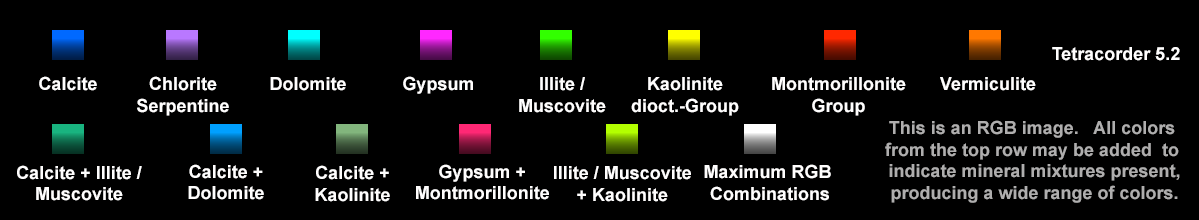
<style>
.page{position:relative;width:1199px;height:220px;background:#000000}
.page>*{position:absolute;margin:0}
.t1{font:18px "Arial-BoldMT";color:#fffefe}
.t2{font:18px "Arial-BoldMT";color:#afaeae}
</style>
<div class="page">
<p class="t1" style="left:1052px;top:47px;width:128px;height:14px">Tetracorder 5.2</p>
<p class="t1" style="left:39px;top:76px;width:58px;height:15px">Calcite</p>
<p class="t1" style="left:137px;top:76px;width:92px;height:40px;text-align:center">Chlorite<br>Serpentine</p>
<p class="t1" style="left:270px;top:77px;width:76px;height:14px">Dolomite</p>
<p class="t1" style="left:403px;top:76px;width:70px;height:18px">Gypsum</p>
<p class="t1" style="left:519px;top:77px;width:87px;height:36px;text-align:center">Illite /<br>Muscovite</p>
<p class="t1" style="left:631px;top:77px;width:108px;height:39px;text-align:center">Kaolinite<br>dioct.-Group</p>
<p class="t1" style="left:772px;top:77px;width:134px;height:39px;text-align:center">Montmorillonite<br>Group</p>
<p class="t1" style="left:940px;top:77px;width:96px;height:14px">Vermiculite</p>
<p class="t2" style="left:885px;top:120px;width:295px;height:83px;text-align:center">This is an RGB image.   All colors <br>from the top row may be added  to <br>indicate mineral mixtures present,<br>producing a wide range of colors.</p>
<p class="t1" style="left:17px;top:165px;width:125px;height:36px;text-align:center">Calcite + Illite /<br>Muscovite</p>
<p class="t1" style="left:188px;top:164px;width:76px;height:36px;text-align:center">Calcite +<br>Dolomite</p>
<p class="t1" style="left:315px;top:165px;width:75px;height:37px;text-align:center">Calcite +<br>Kaolinite</p>
<p class="t1" style="left:416px;top:164px;width:133px;height:36px;text-align:center">Gypsum +<br>Montmorillonite</p>
<p class="t1" style="left:554px;top:166px;width:137px;height:36px;text-align:center">Illite / Muscovite<br>+ Kaolinite</p>
<p class="t1" style="left:704px;top:164px;width:127px;height:37px;text-align:center">Maximum RGB <br>Combinations</p>
</div>
